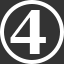
<style>
.page{position:relative;width:64px;height:64px;background:#333333}
.page>*{position:absolute;margin:0}
.t1{font:60px "Georgia-Bold";color:#ffffff}
</style>
<div class="page">
<p class="t1" style="left:10px;top:10px;width:36px;height:44px">4</p>
</div>
